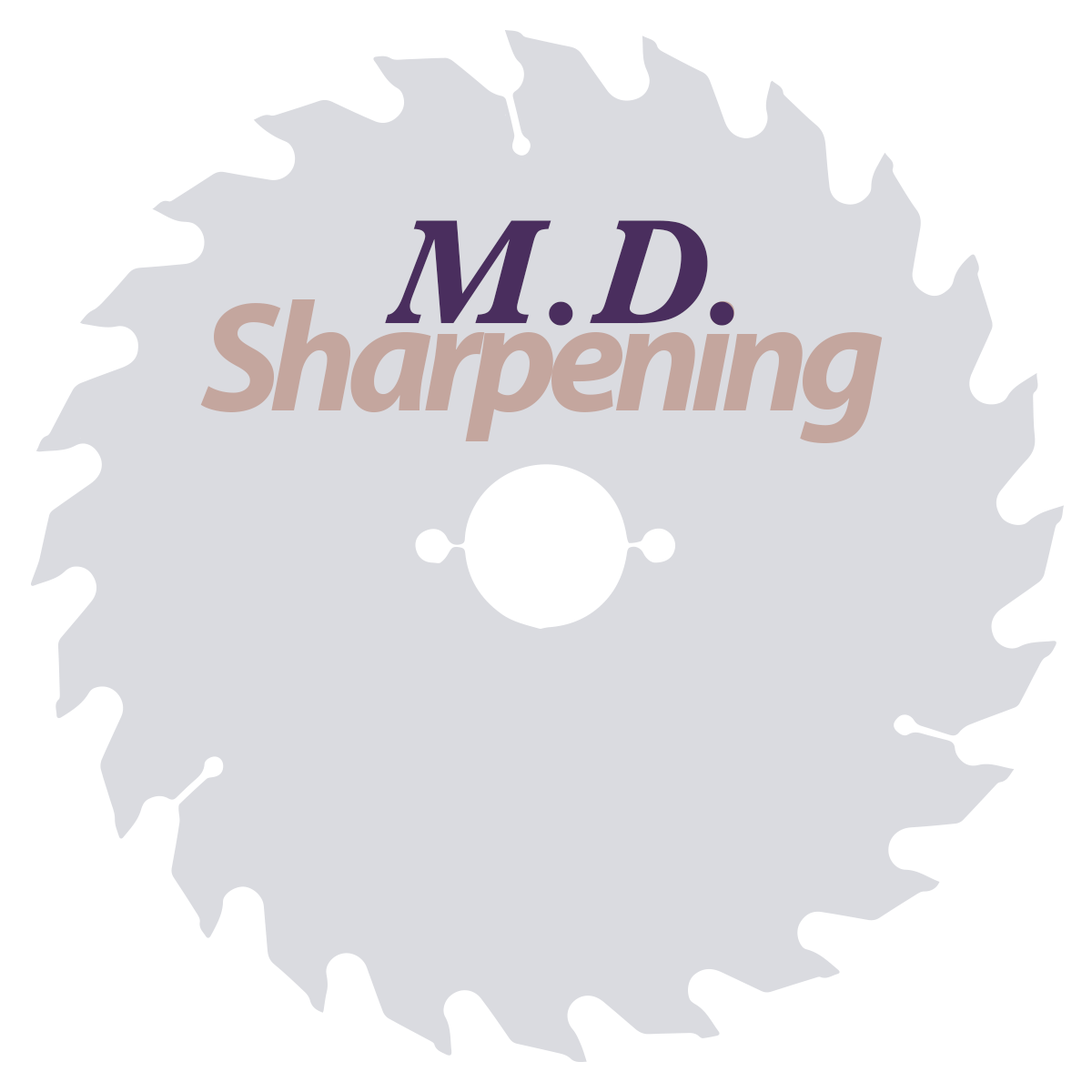
<style>
.page{position:relative;width:1092px;height:1092px;background:#dadbe0}
.page>*{position:absolute;margin:0}
.t1{font:154.7px "Baskerville-BoldItalic";color:#4a2e5e}
.t2{font:218.4px "MyriadArabic-BoldIt";letter-spacing:-0.05em;color:#c4a69e}
</style>
<div class="page">
<p class="t1" style="left:385px;top:220px;width:349px;height:106px">M.D.</p>
<p class="t2" style="left:200px;top:299px;width:683px;height:144px">Sharpening</p>
</div>
